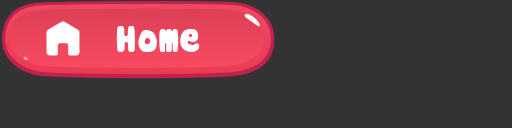
<style>
.page{position:relative;width:512px;height:128px;background:#333333}
.page>*{position:absolute;margin:0}
.t1{font:36px "Cookies";color:#ffffff}
</style>
<div class="page">
<p class="t1" style="left:116px;top:26px;width:84px;height:26px">Home</p>
</div>
